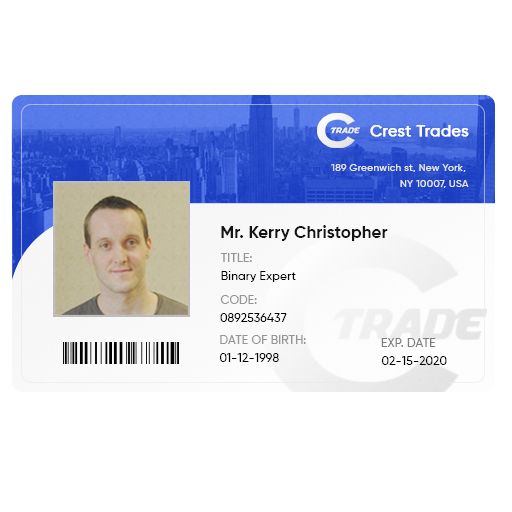
<style>
.page{position:relative;width:512px;height:512px;background:#ffffff}
.page>*{position:absolute;margin:0}
.t1{font:15.7px "Gilroy-Medium";letter-spacing:0.02em;color:#ffffff;font-weight:bold}
.t2{font:10.2px/15.7px "Gilroy-Medium";letter-spacing:0.02em;color:#dfdfdf}
.t3{font:17.3px "Gilroy-Bold";letter-spacing:0.02em;color:#111111;scale:0.95 1}
.t4{font:11.8px "Gilroy-Medium";letter-spacing:0.02em;color:#959595}
.t5{font:11.8px "Gilroy-Medium";letter-spacing:0.02em;color:#010101}
.t6{font:11.8px "Gilroy-Medium";letter-spacing:0.02em;color:#969696}
.t7{font:11.8px "Gilroy-Medium";letter-spacing:0.02em;color:#000000}
.t8{font:11.8px "Gilroy-Medium";letter-spacing:0.02em;color:#686868}
</style>
<div class="page">
<p class="t1" style="left:370px;top:125px;width:99px;height:12px">Crest Trades</p>
<p class="t2" style="left:331px;top:164px;width:138px;height:24px;text-align:right">189 Greenwich st, New York, <br>NY 10007, USA</p>
<p class="t3" style="left:221px;top:225px;width:167px;height:16px">Mr. Kerry Christopher</p>
<p class="t4" style="left:220px;top:253px;width:32px;height:9px">TITLE:</p>
<p class="t5" style="left:221px;top:271px;width:75px;height:11px">Binary Expert</p>
<p class="t6" style="left:220px;top:295px;width:37px;height:9px">CODE:</p>
<p class="t7" style="left:220px;top:313px;width:67px;height:9px">0892536437</p>
<p class="t4" style="left:220px;top:335px;width:86px;height:9px">DATE OF BIRTH:</p>
<p class="t8" style="left:381px;top:338px;width:55px;height:9px">EXP. DATE</p>
<p class="t7" style="left:219px;top:353px;width:60px;height:9px">01-12-1998</p>
<p class="t5" style="left:381px;top:356px;width:66px;height:9px">02-15-2020</p>
</div>
